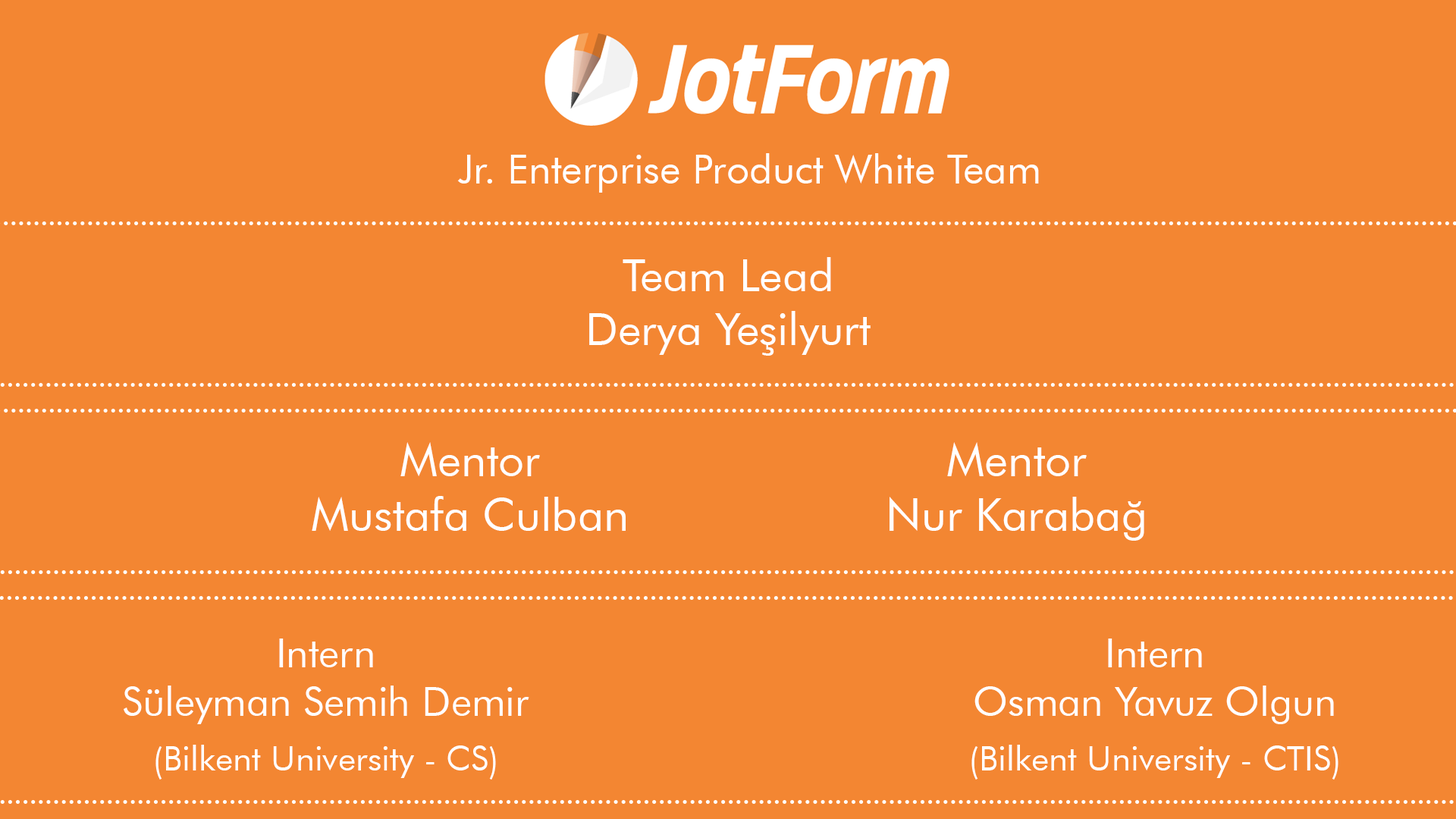
<style>
.page{position:relative;width:1456px;height:819px;background:#f38632}
.page>*{position:absolute;margin:0}
.t1{font:40.4px "FuturaBT-Book";color:#ffffff}
.t2{font:44.9px "FuturaBT-Book";color:#ffffff}
.t3{font:45.5px "FuturaBT-Book";color:#ffffff}
.t4{font:40px "FuturaBT-Book";color:#ffffff}
.t5{font:34.1px/54.6px "FuturaBT-Book";color:#ffffff}
</style>
<div class="page">
<p class="t1" style="left:457px;top:153px;width:582px;height:40px">Jr. Enterprise Product White Team</p>
<p class="t2" style="left:589px;top:257px;width:282px;height:99px;text-align:center">Team Lead<br>Derya Yeşilyurt</p>
<p class="t3" style="left:312px;top:442px;width:314px;height:89px;text-align:center">Mentor<br>Mustafa Culban</p>
<p class="t3" style="left:890px;top:442px;width:254px;height:99px;text-align:center">Mentor<br>Nur Karabağ</p>
<p class="t4" style="left:124px;top:639px;width:405px;height:141px;text-align:center">Intern<br>Süleyman Semih Demir<br><span class="t5">(Bilkent University - CS)</span></p>
<p class="t5" style="left:971px;top:639px;width:367px;height:141px;text-align:center"><span class="t4">Intern<br>Osman Yavuz Olgun<br></span>(Bilkent University - CTIS)</p>
</div>
